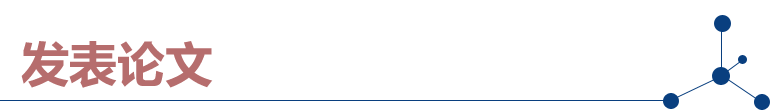
<style>
.page{position:relative;width:770px;height:110px;background:#ffffff}
.page>*{position:absolute;margin:0}
.t1{font:48px "MicrosoftYaHei-Bold";color:#b66d6d}
</style>
<div class="page">
<p class="t1" style="left:21px;top:41px;width:192px;height:47px">发表论文</p>
</div>
